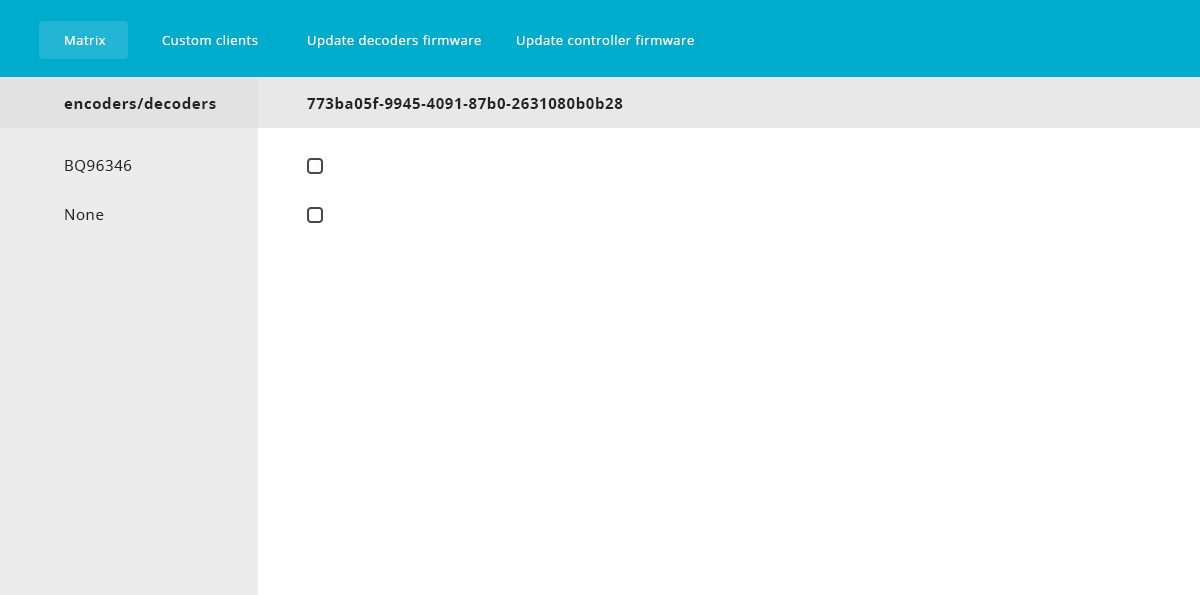
<style>
.page{position:relative;width:1200px;height:595px;background:#ffffff}
.page>*{position:absolute;margin:0}
.t1{font:13px "OpenSans";letter-spacing:0.04em;color:#ffffff}
.t2{font:15px "OpenSans-Bold";letter-spacing:0.04em;color:#242424}
.t3{font:15px "OpenSans";letter-spacing:0.04em;color:#242424}
</style>
<div class="page">
<p class="t1" style="left:65px;top:36px;width:41px;height:9px">Matrix</p>
<p class="t1" style="left:162px;top:35px;width:96px;height:10px">Custom clients</p>
<p class="t1" style="left:308px;top:35px;width:173px;height:13px">Update decoders firmware</p>
<p class="t1" style="left:517px;top:35px;width:177px;height:13px">Update controller firmware</p>
<p class="t2" style="left:64px;top:97px;width:152px;height:12px">encoders/decoders</p>
<p class="t2" style="left:307px;top:97px;width:316px;height:12px">773ba05f-9945-4091-87b0-2631080b0b28</p>
<p class="t3" style="left:65px;top:160px;width:67px;height:13px">BQ96346</p>
<p class="t3" style="left:65px;top:209px;width:39px;height:11px">None</p>
</div>
